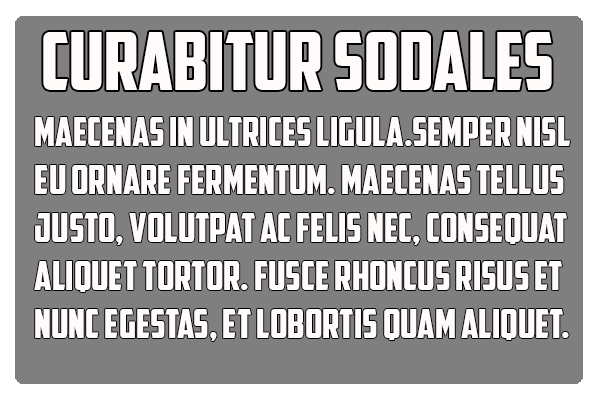
<style>
.page{position:relative;width:600px;height:400px;background:#7f7f7f}
.page>*{position:absolute;margin:0}
.t1{font:80px "AmericanCaptain";color:#fffbfb}
.t2{font:40px "AmericanCaptain";color:#fffbfb}
</style>
<div class="page">
<p class="t1" style="left:43px;top:32px;width:509px;height:58px">Curabitur sodales</p>
<p class="t2" style="left:34px;top:117px;width:536px;height:224px">Maecenas in ultrices ligula.semper nisl<br>eu ornare fermentum. Maecenas tellus <br>justo, volutpat ac felis nec, consequat <br>aliquet tortor. Fusce rhoncus risus et <br>nunc egestas, et lobortis quam aliquet.</p>
</div>
